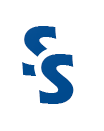
<style>
.page{position:relative;width:104px;height:131px;background:#ffffff}
.page>*{position:absolute;margin:0}
.t1{font:72px "ErasITC-Bold";color:#044d91}
.t2{font:72px "ErasITC-Bold";color:#014b8f}
</style>
<div class="page">
<p class="t1" style="left:22px;top:26px;width:35px;height:50px">S</p>
<p class="t2" style="left:39px;top:54px;width:35px;height:50px">S</p>
</div>
